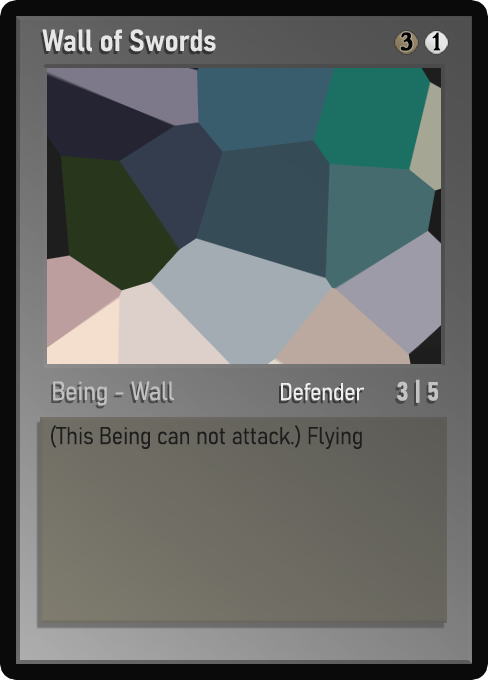
<style>
.page{position:relative;width:488px;height:680px}
.page>*{position:absolute;margin:0}
.t1{font:30px "Bahnschrift-SemiBoldSemiCondensed";color:#f2f2f2;font-weight:bold}
.t2{font:25px "WTRRoycroft";color:#000000;font-weight:bold;scale:1.09 1}
.t3{font:26px "Bahnschrift-LightSemiCondensed";color:#c8c8c8;font-weight:bold}
.t4{font:24px "Bahnschrift-LightSemiCondensed";color:#f0efef;font-weight:bold}
.t5{font:26px "Bahnschrift-BoldSemiCondensed";color:#c3c3c3;font-weight:bold}
.t6{font:24px "Bahnschrift-LightSemiCondensed";color:#1e1e1e;font-weight:bold}
</style>
<div class="page">
<p class="t1" style="left:42px;top:29px;width:174px;height:23px;opacity:0.9">Wall of Swords</p>
<p class="t2" style="left:400px;top:32px;width:13px;height:19px">3</p>
<p class="t2" style="left:432px;top:32px;width:9px;height:19px">1</p>
<p class="t3" style="left:53px;top:381px;width:121px;height:25px;opacity:0.9">Being - Wall</p>
<p class="t4" style="left:281px;top:383px;width:84px;height:18px">Defender</p>
<p class="t5" style="left:397px;top:379px;width:41px;height:24px">3 | 5</p>
<p class="t6" style="left:51px;top:425px;width:311px;height:25px">(This Being can not attack.) Flying</p>
</div>
